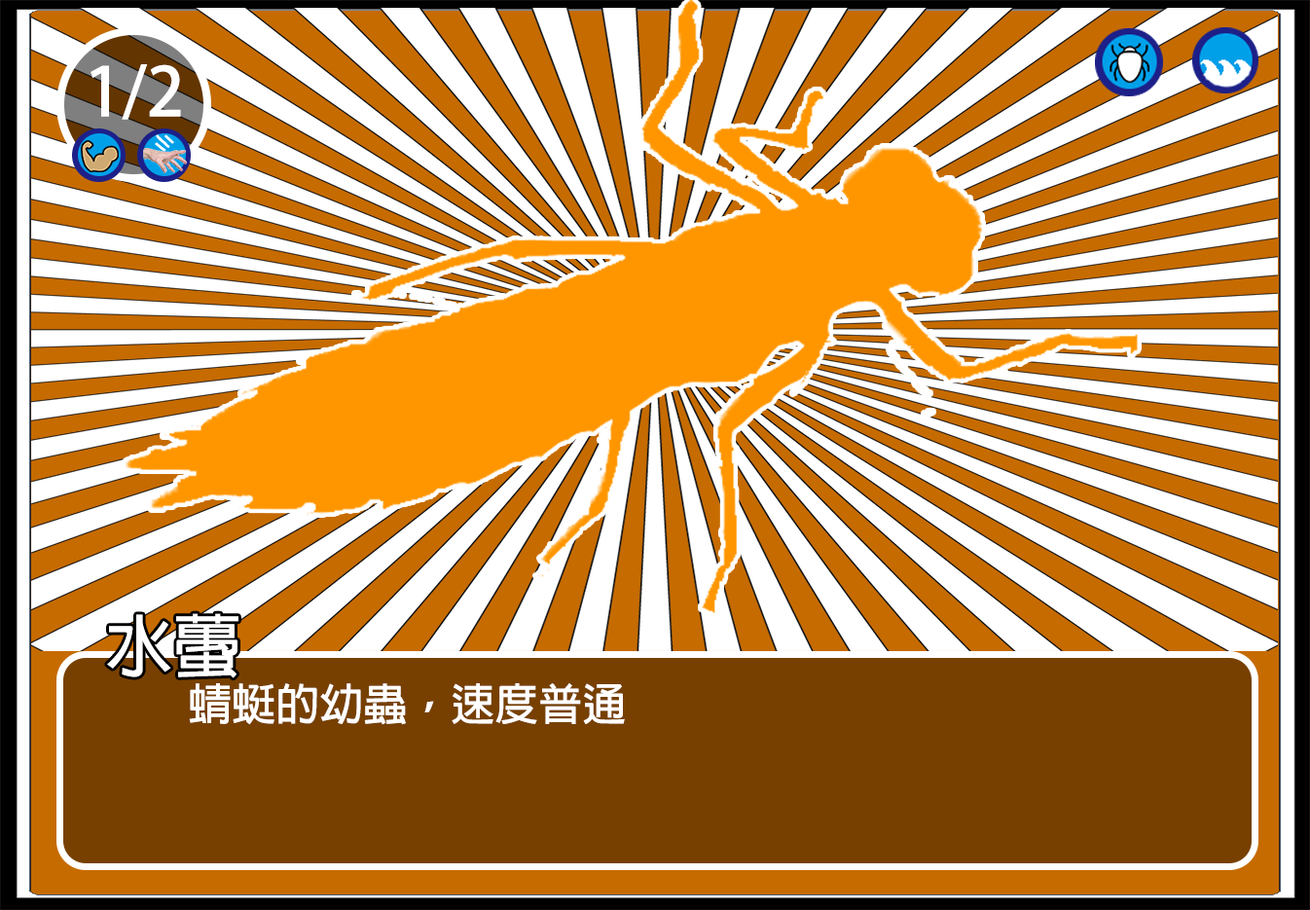
<style>
.page{position:relative;width:1310px;height:910px;background:#ffffff}
.page>*{position:absolute;margin:0}
.t1{font:66.9px "AdobeFanHeitiStd-Bold";color:#ffffff}
.t2{font:68.1px "AdobeFanHeitiStd-Bold";color:#ffffff}
.t3{font:43.8px "AdobeFanHeitiStd-Bold";color:#ffffff}
</style>
<div class="page">
<p class="t1" style="left:91px;top:64px;width:90px;height:56px">1/2</p>
<p class="t2" style="left:107px;top:613px;width:131px;height:65px">水蠆</p>
<p class="t3" style="left:189px;top:683px;width:436px;height:42px">蜻蜓的幼蟲，速度普通</p>
</div>
